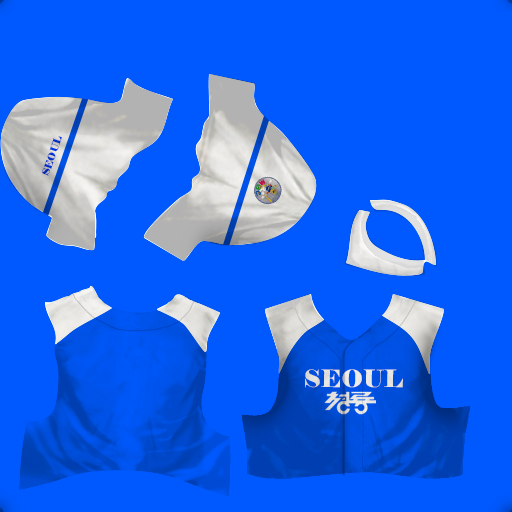
<style>
.page{position:relative;width:512px;height:512px;background:#0059ff}
.page>*{position:absolute;margin:0}
.t1{font:10px "Elephant-Regular";color:#0030c9}
.t2{font:24px "Elephant-Regular";color:#e7e5e2}
</style>
<div class="page">
<p class="t1" style="left:42px;top:136px;width:20px;height:40px;rotate:-71deg">SEOUL</p>
<p class="t2" style="left:305px;top:369px;width:98px;height:19px;rotate:1deg">SEOUL</p>
</div>
